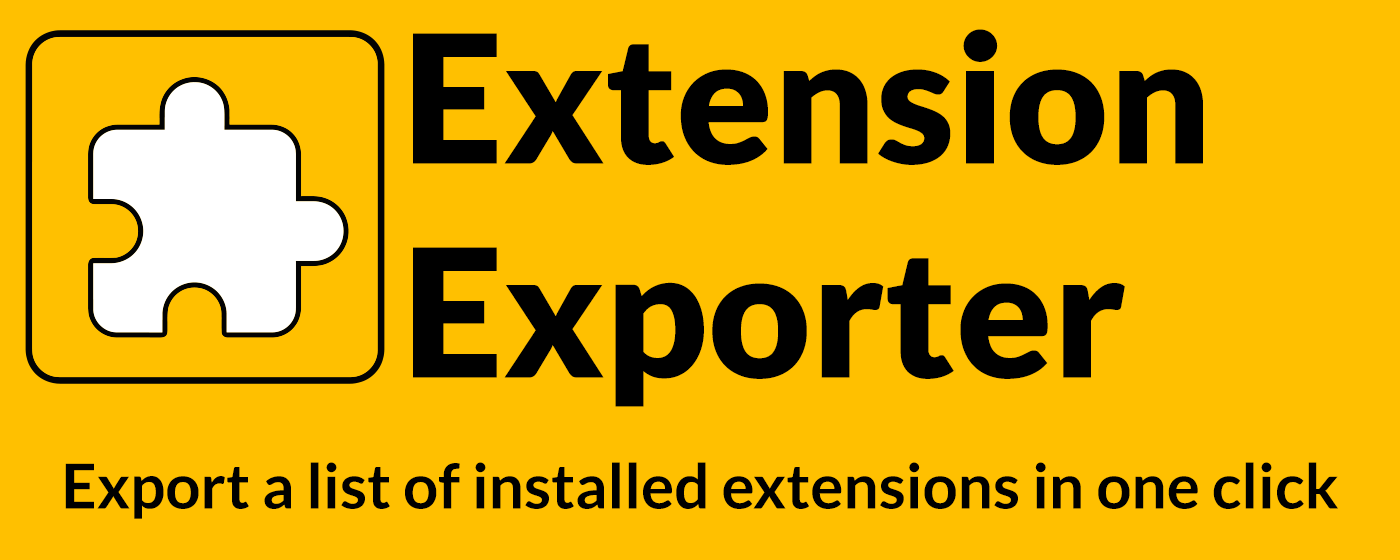
<style>
.page{position:relative;width:1400px;height:560px;background:#ffc000}
.page>*{position:absolute;margin:0}
.t1{font:178px/214px "Lato-Black";color:#000000}
.t2{font:62px "Lato-Bold";color:#000000}
</style>
<div class="page">
<p class="t1" style="left:413px;top:29px;width:790px;height:378px">Extension<br>Exporter</p>
<p class="t2" style="left:65px;top:462px;width:1273px;height:57px">Export a list of installed extensions in one click</p>
</div>
